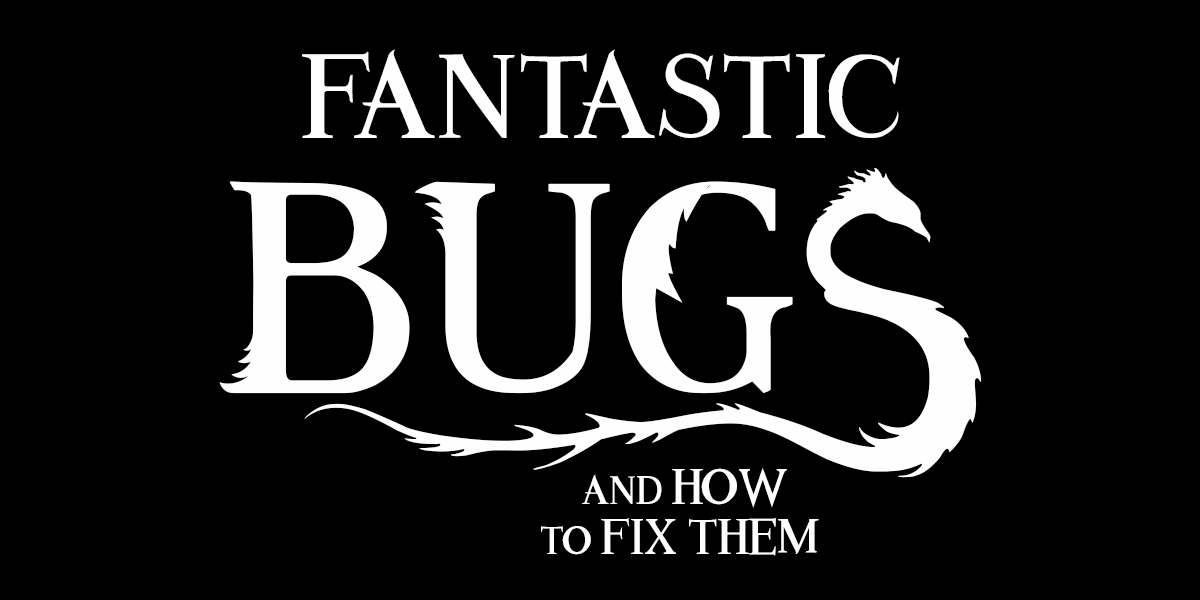
<style>
.page{position:relative;width:1200px;height:600px;background:#000000}
.page>*{position:absolute;margin:0}
.t1{font:100px "AnimalesFantastic";color:#fefefe}
.t2{font:250px "AnimalesFantastic";color:#fefefe}
.t3{font:41.7px "AnimalesFantastic";color:#fefefe}
.t4{font:33.3px "AnimalesFantastic";color:#fefefe}
</style>
<div class="page">
<p class="t1" style="left:302px;top:49px;width:598px;height:89px">fantastic</p>
<p class="t2" style="left:219px;top:168px;width:763px;height:310px">BUG$</p>
<p class="t3" style="left:541px;top:468px;width:278px;height:88px"><span class="t4">and </span>how<br><span class="t4">to </span>fix them</p>
</div>
